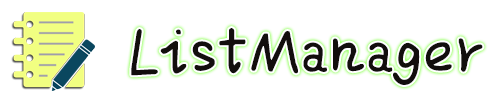
<style>
.page{position:relative;width:500px;height:100px;background:#ffffff}
.page>*{position:absolute;margin:0}
.t1{font:80px "FZMWJW--GB1-0";color:#120e0d}
</style>
<div class="page">
<p class="t1" style="left:131px;top:28px;width:352px;height:57px">ListManager</p>
</div>
